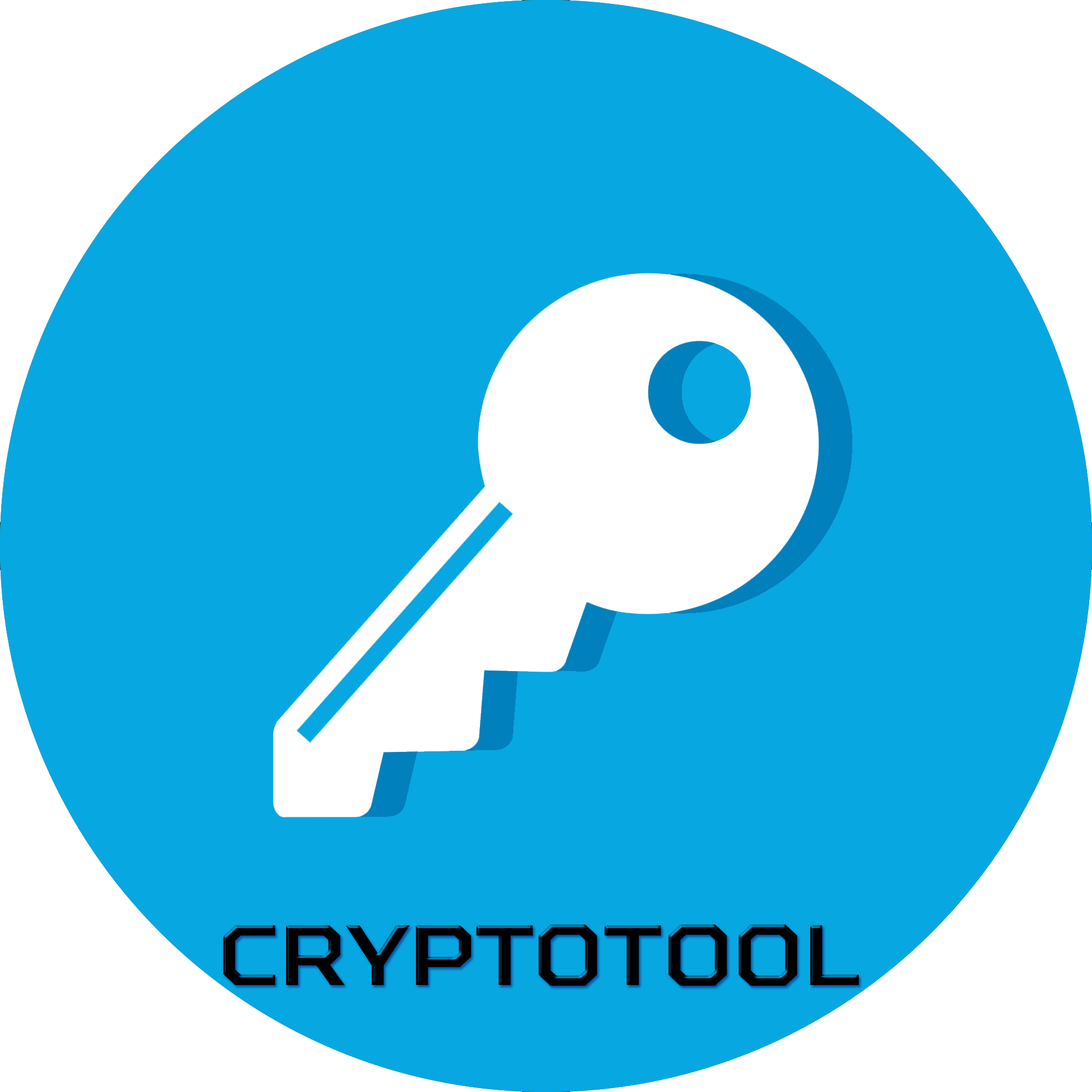
<style>
.page{position:relative;width:1092px;height:1092px;background:#07a7e1}
.page>*{position:absolute;margin:0}
.t1{font:85.1px "SquaresBold";color:#000000}
</style>
<div class="page">
<p class="t1" style="left:223px;top:924px;width:636px;height:62px">CryptoTool</p>
</div>
